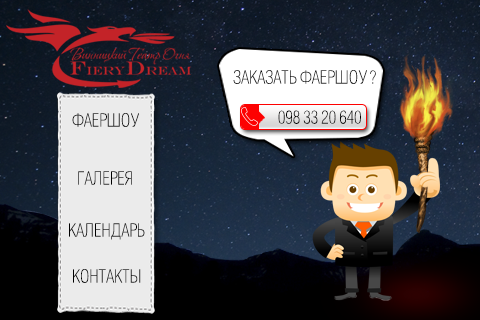
<style>
.page{position:relative;width:480px;height:320px}
.page>*{position:absolute;margin:0}
.t1{font:18px "HeliosCondThin";letter-spacing:0.001em;color:#000000;text-transform:uppercase}
</style>
<div class="page">
<p class="t1" style="left:233px;top:70px;width:143px;height:14px">Заказать фаершоу ?</p>
<p class="t1" style="left:72px;top:113px;width:67px;height:14px">фАЕРШОУ</p>
<p class="t1" style="left:278px;top:110px;width:83px;height:14px">098 33 20 640</p>
<p class="t1" style="left:78px;top:171px;width:54px;height:14px">галерея</p>
<p class="t1" style="left:69px;top:223px;width:76px;height:17px">Календарь</p>
<p class="t1" style="left:73px;top:269px;width:68px;height:14px">Контакты</p>
</div>
